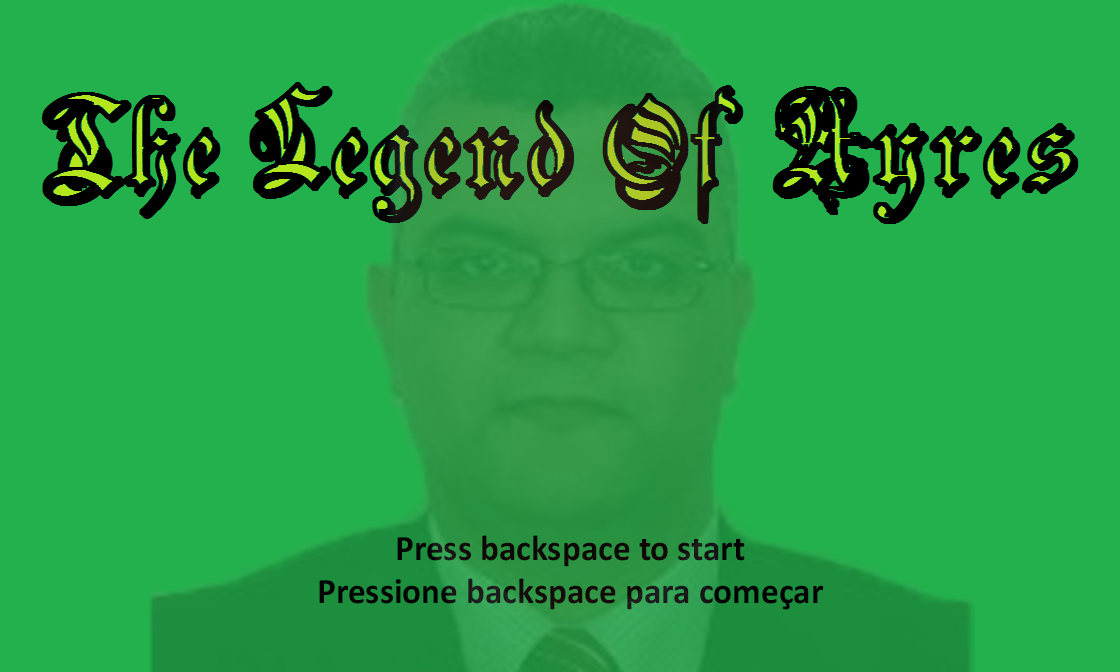
<style>
.page{position:relative;width:1120px;height:672px;background:#22b14c}
.page>*{position:absolute;margin:0}
.t1{font:35.9px "Calibri-Bold";color:#000000}
</style>
<div class="page">
<p class="t1" style="left:319px;top:535px;width:504px;height:75px;text-align:center">Press backspace to start<br>Pressione backspace para começar</p>
</div>
